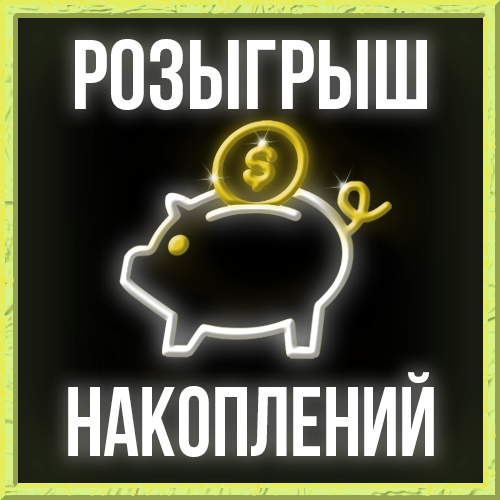
<style>
.page{position:relative;width:500px;height:500px}
.page>*{position:absolute;margin:0}
.t1{font:98px "BebasNeueBold";color:#ffffff}
.t2{font:98px "BebasNeueBold";color:#ffffff;scale:0.91 1}
</style>
<div class="page">
<p class="t1" style="left:75px;top:39px;width:352px;height:71px">розыгрыш</p>
<p class="t2" style="left:68px;top:372px;width:366px;height:85px">накоплений</p>
</div>
